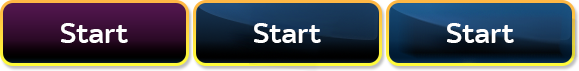
<style>
.page{position:relative;width:579px;height:71px}
.page>*{position:absolute;margin:0}
.t1{font:30px "SkyTextMedium-Regular";color:#ffffff}
</style>
<div class="page">
<p class="t1" style="left:61px;top:23px;width:67px;height:20px">Start</p>
<p class="t1" style="left:254px;top:23px;width:67px;height:20px">Start</p>
<p class="t1" style="left:447px;top:23px;width:67px;height:20px">Start</p>
</div>
